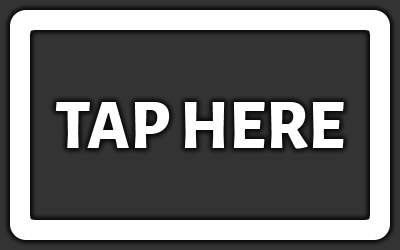
<style>
.page{position:relative;width:400px;height:250px;background:#333333}
.page>*{position:absolute;margin:0}
.t1{font:70px "AlegreyaSans-ExtraBold";color:#ffffff}
</style>
<div class="page">
<p class="t1" style="left:55px;top:102px;width:289px;height:47px">TAP HERE</p>
</div>
